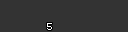
<style>
.page{position:relative;width:128px;height:32px;background:#333333}
.page>*{position:absolute;margin:0}
.t1{font:10px "Terminal";color:#ffffff}
</style>
<div class="page">
<p class="t1" style="left:47px;top:23px;width:5px;height:7px">5</p>
</div>
